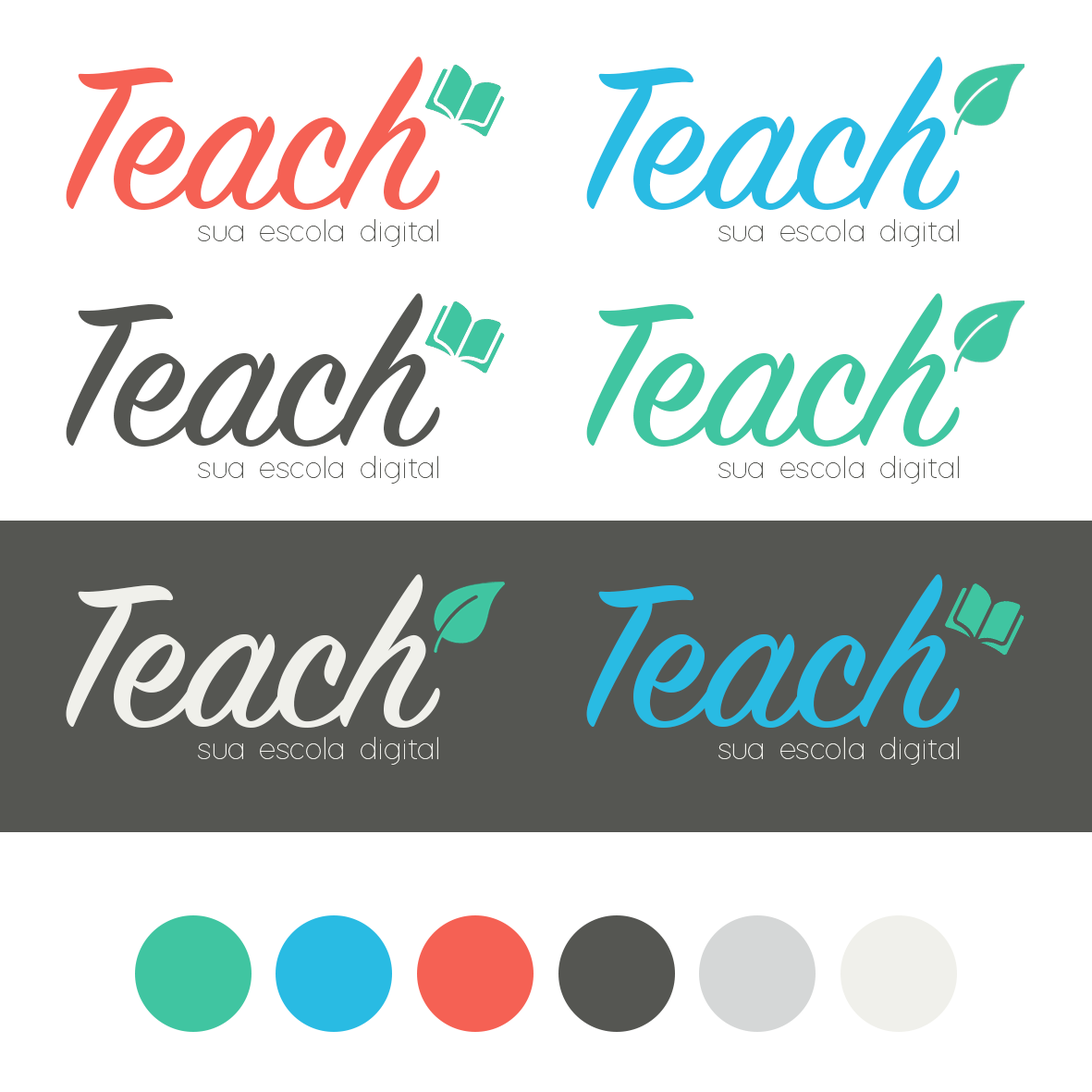
<style>
.page{position:relative;width:1092px;height:1092px;background:#ffffff}
.page>*{position:absolute;margin:0}
.t1{font:225.5px "SignPainter-HouseScript";color:#f56154}
.t2{font:225.5px "SignPainter-HouseScript";color:#29bbe3}
.t3{font:31.8px "SoftLine";color:#555652}
.t4{font:225.5px "SignPainter-HouseScript";color:#555652}
.t5{font:225.5px "SignPainter-HouseScript";color:#40c5a1}
.t6{font:225.5px "SignPainter-HouseScript";color:#f0f0eb}
.t7{font:31.8px "SoftLine";color:#f0f0eb}
</style>
<div class="page">
<p class="t1" style="left:66px;top:56px;width:374px;height:154px">Teach</p>
<p class="t2" style="left:586px;top:56px;width:374px;height:154px">Teach</p>
<p class="t3" style="left:198px;top:218px;width:240px;height:29px">sua escola digital</p>
<p class="t3" style="left:718px;top:218px;width:241px;height:29px">sua escola digital</p>
<p class="t4" style="left:66px;top:293px;width:374px;height:154px">Teach</p>
<p class="t5" style="left:586px;top:293px;width:374px;height:154px">Teach</p>
<p class="t3" style="left:198px;top:455px;width:240px;height:29px">sua escola digital</p>
<p class="t3" style="left:718px;top:455px;width:241px;height:29px">sua escola digital</p>
<p class="t6" style="left:66px;top:574px;width:374px;height:154px">Teach</p>
<p class="t2" style="left:586px;top:574px;width:374px;height:154px">Teach</p>
<p class="t7" style="left:198px;top:736px;width:240px;height:29px">sua escola digital</p>
<p class="t7" style="left:718px;top:736px;width:241px;height:29px">sua escola digital</p>
</div>
